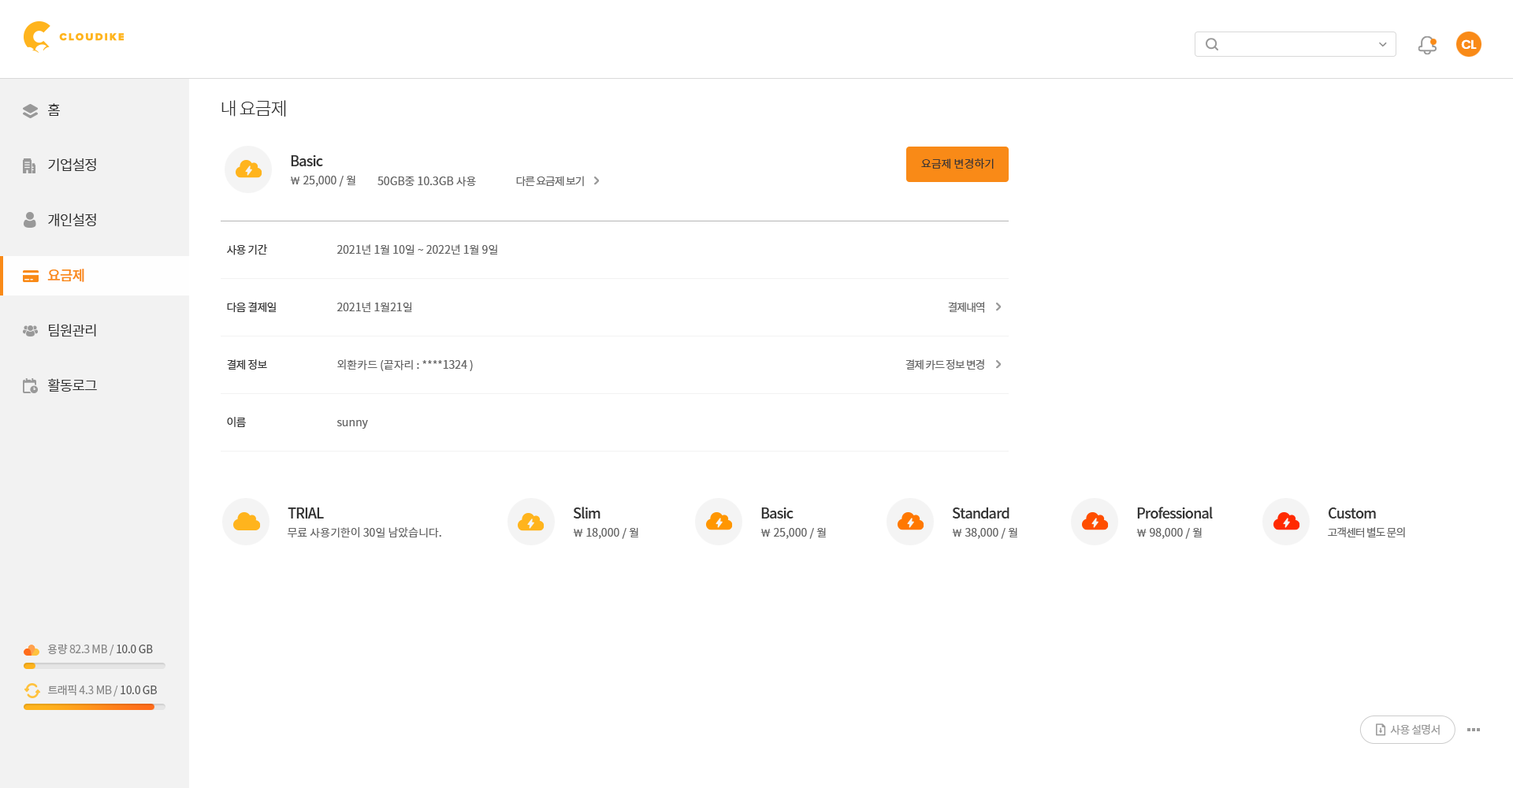
<style>
.page{position:relative;width:1513px;height:788px;background:#ffffff}
.page>*{position:absolute;margin:0}
.t1{font:12.6px "Poppins-SemiBold";letter-spacing:-0.05em;color:#ffffff}
.t2{font:18.1px "NotoSansCJKkr-Light";letter-spacing:-0.05em;color:#333333}
.t3{font:14.2px/55.2px "NotoSansCJKkr-DemiLight";letter-spacing:-0.05em;color:#333333}
.t4{font:14.2px/55.2px "NotoSansCJKkr-Medium";letter-spacing:-0.05em;color:#f98a17}
.t5{font:14.2px "NotoSansCJKkr-Medium";letter-spacing:-0.05em;color:#333333}
.t6{font:11px "NotoSansCJKkr-DemiLight";color:#333333}
.t7{font:11px "NotoSansCJKkr-Regular";color:#666666}
.t8{font:11px "NotoSansCJKkr-Regular";letter-spacing:-0.075em;color:#666666}
.t9{font:11px "NotoSansCJKkr-Regular";letter-spacing:-0.05em;color:#333333}
.t10{font:11px "NotoSansCJKkr-Regular";letter-spacing:-0.025em;color:#888888}
.t11{font:11px "NotoSansCJKkr-Regular";letter-spacing:-0.025em;color:#585858}
.t12{font:11px "NotoSansCJKkr-Regular";letter-spacing:-0.05em;color:#999999}
</style>
<div class="page">
<p class="t1" style="left:1461px;top:39px;width:16px;height:10px">CL</p>
<p class="t2" style="left:221px;top:100px;width:65px;height:17px">내 요금제</p>
<p class="t3" style="left:47px;top:103px;width:50px;height:289px">홈<br>기업설정<br>개인설정<br><span class="t4">요금제<br></span>팀원관리<br>활동로그</p>
<p class="t5" style="left:291px;top:155px;width:32px;height:11px">Basic</p>
<p class="t6" style="left:921px;top:158px;width:73px;height:11px">요금제 변경하기</p>
<p class="t7" style="left:290px;top:175px;width:65px;height:12px">￦ 25,000 / 월</p>
<p class="t7" style="left:377px;top:177px;width:99px;height:10px">50GB중 10.3GB 사용</p>
<p class="t8" style="left:516px;top:176px;width:68px;height:11px">다른 요금제 보기</p>
<p class="t9" style="left:227px;top:244px;width:40px;height:11px">사용 기간</p>
<p class="t7" style="left:337px;top:244px;width:160px;height:11px">2021년 1월 10일 ~ 2022년 1월 9일</p>
<p class="t9" style="left:227px;top:302px;width:49px;height:11px">다음 결제일</p>
<p class="t7" style="left:337px;top:302px;width:75px;height:10px">2021년 1월21일</p>
<p class="t8" style="left:948px;top:302px;width:36px;height:11px">결제내역</p>
<p class="t9" style="left:227px;top:359px;width:40px;height:11px">결제 정보</p>
<p class="t7" style="left:337px;top:359px;width:136px;height:12px">외환카드 (끝자리 : ****1324 )</p>
<p class="t8" style="left:905px;top:359px;width:79px;height:11px">결제 카드 정보 변경</p>
<p class="t9" style="left:227px;top:417px;width:19px;height:10px">이름</p>
<p class="t7" style="left:337px;top:420px;width:31px;height:9px">sunny</p>
<p class="t5" style="left:288px;top:508px;width:36px;height:11px">TRIAL</p>
<p class="t5" style="left:574px;top:507px;width:27px;height:12px">Slim</p>
<p class="t5" style="left:761px;top:508px;width:33px;height:11px">Basic</p>
<p class="t5" style="left:953px;top:507px;width:57px;height:12px">Standard</p>
<p class="t5" style="left:1137px;top:507px;width:76px;height:12px">Professional</p>
<p class="t5" style="left:1329px;top:508px;width:47px;height:11px">Custom</p>
<p class="t7" style="left:288px;top:527px;width:153px;height:11px">무료 사용기한이 30일 남았습니다.</p>
<p class="t7" style="left:573px;top:527px;width:65px;height:12px">￦ 18,000 / 월</p>
<p class="t7" style="left:760px;top:527px;width:66px;height:12px">￦ 25,000 / 월</p>
<p class="t7" style="left:952px;top:527px;width:65px;height:12px">￦ 38,000 / 월</p>
<p class="t7" style="left:1136px;top:527px;width:66px;height:12px">￦ 98,000 / 월</p>
<p class="t8" style="left:1328px;top:527px;width:77px;height:10px">고객센터 별도 문의</p>
<p class="t10" style="left:47px;top:644px;width:106px;height:12px">용량 82.3 MB / <span class="t11">10.0 GB</span></p>
<p class="t10" style="left:48px;top:685px;width:109px;height:12px">트래픽 4.3 MB / <span class="t11">10.0 GB</span></p>
<p class="t12" style="left:1390px;top:724px;width:50px;height:11px">사용 설명서</p>
</div>
